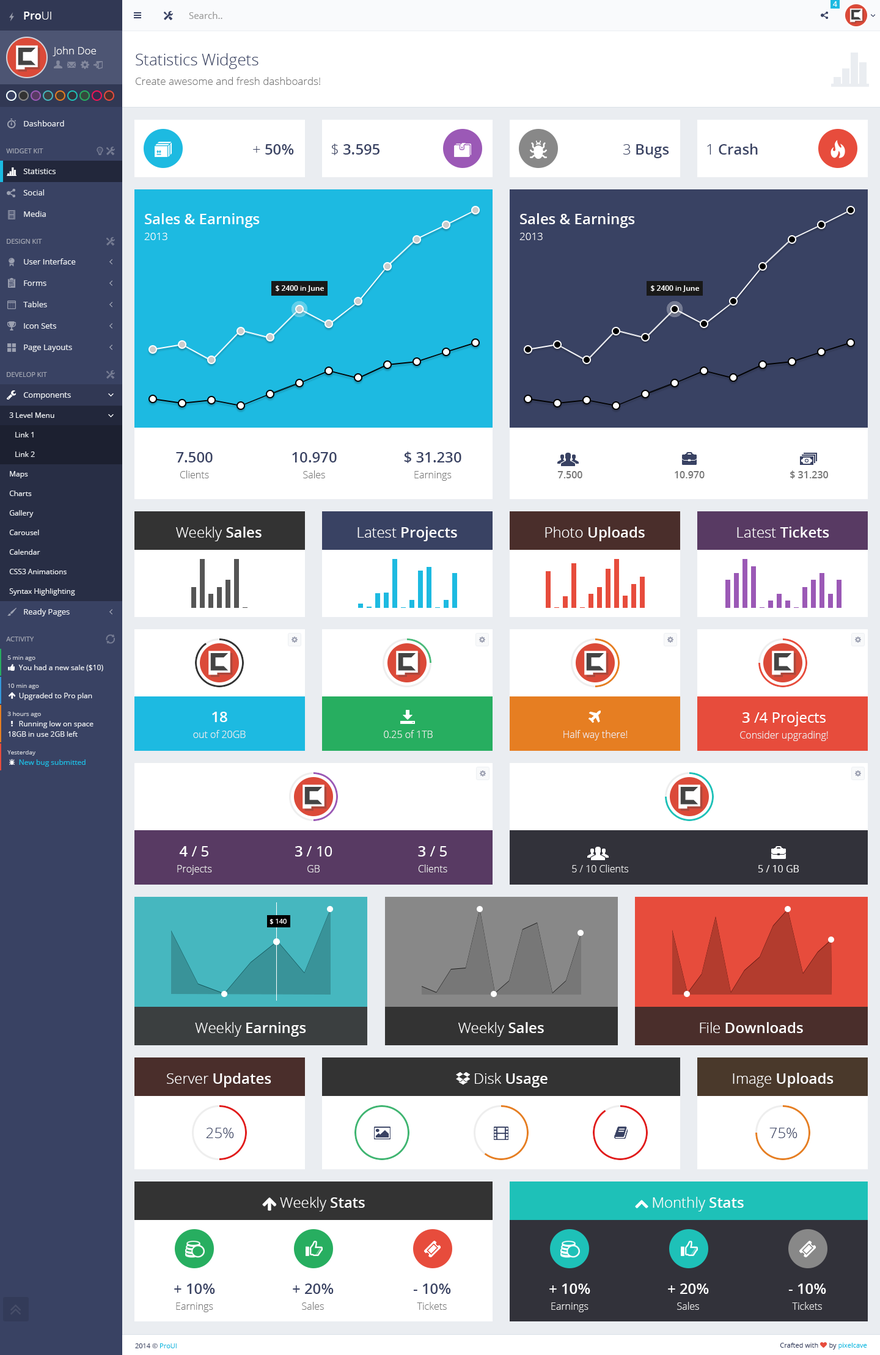
<style>
.page{position:relative;width:880px;height:1355px;background:#ffffff}
.page>*{position:absolute;margin:0}
.t1{font:7.3px "OpenSans";color:#ffffff}
.t2{font:11px "OpenSans-Semibold";color:#ffffff}
.t3{font:11px "OpenSans-Light";color:#ffffff}
.t4{font:9.2px "OpenSans";color:#999999}
.t5{font:10.4px "OpenSans-Light";color:#ffffff}
.t6{font:10.4px/19.6px "OpenSans-Light";color:#777777}
.t7{font:15.9px/19.6px "OpenSans-Light";color:#394263}
.t8{font:7.9px "OpenSans";color:#eaedf1}
.t9{font:6.7px "OpenSans";color:#a2a6b3}
.t10{font:14.7px "OpenSans-Semibold";color:#394263}
.t11{font:14.7px "OpenSans-Light";color:#394263}
.t12{font:14.7px/15.9px "OpenSans-Semibold";color:#ffffff}
.t13{font:10.4px/15.9px "OpenSans-Light";color:#ffffff}
.t14{font:7.3px "OpenSans-Semibold";color:#ffffff}
.t15{font:7.3px "OpenSans";color:#eaedf1}
.t16{font:9.8px/15.9px "OpenSans-Light";color:#777777}
.t17{font:14.7px/15.9px "OpenSans-Semibold";color:#394263}
.t18{font:9.8px "OpenSans-Semibold";color:#777777}
.t19{font:14.7px "OpenSans-Light";color:#ffffff}
.t20{font:14.7px "OpenSans-Semibold";color:#ffffff}
.t21{font:6.1px "OpenSans";color:#c8cbd3}
.t22{font:9.8px/15.9px "OpenSans-Light";color:#eeeeee}
.t23{font:14.7px/15.9px "OpenSans";color:#ffffff}
.t24{font:9.8px "OpenSans-Light";color:#eeeeee}
.t25{font:7.3px "OpenSans";color:#1bbae1}
.t26{font:9.8px "OpenSans";color:#eeeeee}
.t27{font:6.7px "OpenSans";color:#ffffff}
.t28{font:14.7px/15.9px "OpenSans";color:#394263}
.t29{font:6.7px "OpenSans";color:#394263}
.t30{font:6.7px "OpenSans";color:#0dbae1}
.t31{font:6.7px "OpenSans";color:#01bae1}
</style>
<div class="page">
<p class="t1" style="left:833px;top:1px;width:4px;height:6px">4</p>
<p class="t2" style="left:24px;top:12px;width:27px;height:8px">Pro<span class="t3">UI</span></p>
<p class="t4" style="left:189px;top:12px;width:33px;height:7px">Search..</p>
<p class="t5" style="left:53px;top:46px;width:43px;height:10px">John Doe</p>
<p class="t6" style="left:136px;top:53px;width:184px;height:32px"><span class="t7">Statistics Widgets<br></span>Create awesome and fresh dashboards!</p>
<p class="t8" style="left:24px;top:120px;width:40px;height:6px">Dashboard</p>
<p class="t9" style="left:6px;top:148px;width:37px;height:5px">WIDGET KIT</p>
<p class="t10" style="left:253px;top:144px;width:41px;height:11px"><span class="t11">+ </span>50%</p>
<p class="t10" style="left:331px;top:144px;width:48px;height:11px"><span class="t11">$ </span>3.595</p>
<p class="t10" style="left:623px;top:144px;width:46px;height:14px"><span class="t11">3 </span>Bugs</p>
<p class="t10" style="left:707px;top:144px;width:51px;height:11px"><span class="t11">1 </span>Crash</p>
<p class="t8" style="left:23px;top:169px;width:33px;height:5px">Statistics</p>
<p class="t8" style="left:23px;top:189px;width:21px;height:7px">Social</p>
<p class="t8" style="left:24px;top:211px;width:22px;height:6px">Media</p>
<p class="t12" style="left:144px;top:213px;width:116px;height:27px">Sales &amp; Earnings<br><span class="t13">2013</span></p>
<p class="t12" style="left:519px;top:213px;width:116px;height:27px">Sales &amp; Earnings<br><span class="t13">2013</span></p>
<p class="t9" style="left:7px;top:239px;width:35px;height:5px">DESIGN KIT</p>
<p class="t8" style="left:24px;top:258px;width:52px;height:7px">User Interface</p>
<p class="t8" style="left:24px;top:280px;width:22px;height:6px">Forms</p>
<p class="t14" style="left:276px;top:285px;width:48px;height:7px"><span class="t1">$ </span>2400<span class="t1"> in </span>June</p>
<p class="t14" style="left:651px;top:285px;width:48px;height:7px"><span class="t1">$ </span>2400<span class="t1"> in </span>June</p>
<p class="t8" style="left:23px;top:301px;width:24px;height:6px">Tables</p>
<p class="t8" style="left:24px;top:323px;width:32px;height:6px">Icon Sets</p>
<p class="t8" style="left:24px;top:345px;width:48px;height:7px">Page Layouts</p>
<p class="t9" style="left:7px;top:372px;width:40px;height:5px">DEVELOP KIT</p>
<p class="t8" style="left:23px;top:392px;width:48px;height:8px">Components</p>
<p class="t15" style="left:9px;top:412px;width:45px;height:6px">3 Level Menu</p>
<p class="t15" style="left:15px;top:432px;width:19px;height:5px">Link 1</p>
<p class="t15" style="left:15px;top:452px;width:20px;height:5px">Link 2</p>
<p class="t16" style="left:176px;top:452px;width:37px;height:26px;text-align:center"><span class="t17">7.500<br></span>Clients</p>
<p class="t17" style="left:292px;top:452px;width:45px;height:26px;text-align:center">10.970<br><span class="t16">Sales</span></p>
<p class="t17" style="left:404px;top:452px;width:57px;height:29px;text-align:center">$ 31.230<br><span class="t16">Earnings</span></p>
<p class="t15" style="left:10px;top:471px;width:18px;height:7px">Maps</p>
<p class="t18" style="left:557px;top:471px;width:25px;height:7px">7.500</p>
<p class="t18" style="left:675px;top:471px;width:30px;height:7px">10.970</p>
<p class="t18" style="left:790px;top:470px;width:39px;height:9px">$ 31.230</p>
<p class="t15" style="left:9px;top:491px;width:23px;height:5px">Charts</p>
<p class="t15" style="left:9px;top:510px;width:25px;height:8px">Gallery</p>
<p class="t15" style="left:9px;top:530px;width:30px;height:5px">Carousel</p>
<p class="t19" style="left:176px;top:527px;width:86px;height:14px">Weekly<span class="t20"> Sales</span></p>
<p class="t20" style="left:357px;top:527px;width:100px;height:14px"><span class="t19">Latest</span> Projects</p>
<p class="t20" style="left:545px;top:527px;width:100px;height:14px"><span class="t19">Photo </span>Uploads</p>
<p class="t20" style="left:737px;top:527px;width:92px;height:11px"><span class="t19">Latest </span>Tickets</p>
<p class="t15" style="left:9px;top:549px;width:31px;height:6px">Calendar</p>
<p class="t15" style="left:9px;top:569px;width:58px;height:5px">CSS3 Animations</p>
<p class="t15" style="left:9px;top:588px;width:66px;height:8px">Syntax Highlighting</p>
<p class="t8" style="left:24px;top:609px;width:46px;height:8px">Ready Pages</p>
<p class="t9" style="left:6px;top:637px;width:28px;height:5px">ACTIVITY</p>
<p class="t21" style="left:7px;top:656px;width:28px;height:5px">5 min ago</p>
<p class="t15" style="left:18px;top:665px;width:85px;height:7px">You had a new sale ($10)</p>
<p class="t21" style="left:8px;top:684px;width:31px;height:5px">10 min ago</p>
<p class="t15" style="left:19px;top:693px;width:73px;height:7px">Upgraded to Pro plan</p>
<p class="t21" style="left:7px;top:712px;width:34px;height:5px">3 hours ago</p>
<p class="t22" style="left:193px;top:712px;width:53px;height:26px;text-align:center"><span class="t12">18<br></span>out of 20GB</p>
<p class="t22" style="left:740px;top:712px;width:88px;height:29px;text-align:center"><span class="t12">3 </span><span class="t23">/4 Projects<br></span>Consider upgrading!</p>
<p class="t15" style="left:19px;top:721px;width:74px;height:7px">Running low on space</p>
<p class="t15" style="left:8px;top:731px;width:70px;height:6px">18GB in use 2GB left</p>
<p class="t24" style="left:384px;top:730px;width:49px;height:8px">0.25 of 1TB</p>
<p class="t24" style="left:563px;top:730px;width:65px;height:11px">Half way there!</p>
<p class="t21" style="left:7px;top:750px;width:28px;height:6px">Yesterday</p>
<p class="t25" style="left:19px;top:759px;width:67px;height:8px">New bug submitted</p>
<p class="t22" style="left:177px;top:846px;width:35px;height:29px;text-align:center"><span class="t12">4 </span><span class="t23">/ 5<br></span>Projects</p>
<p class="t23" style="left:295px;top:846px;width:37px;height:27px;text-align:center"><span class="t12">3 </span>/ 10<br><span class="t22">GB</span></p>
<p class="t22" style="left:418px;top:846px;width:29px;height:27px;text-align:center"><span class="t12">3 </span><span class="t23">/ 5<br></span>Clients</p>
<p class="t24" style="left:572px;top:865px;width:56px;height:8px">5 / 10 Clients</p>
<p class="t26" style="left:758px;top:865px;width:41px;height:8px">5 / 10 GB</p>
<p class="t27" style="left:269px;top:919px;width:18px;height:5px">$ 140</p>
<p class="t20" style="left:195px;top:1022px;width:111px;height:15px"><span class="t19">Weekly</span> Earnings</p>
<p class="t19" style="left:458px;top:1022px;width:86px;height:15px">Weekly <span class="t20">Sales</span></p>
<p class="t20" style="left:700px;top:1022px;width:103px;height:11px"><span class="t19">File </span>Downloads</p>
<p class="t20" style="left:167px;top:1073px;width:104px;height:15px"><span class="t19">Server </span>Updates</p>
<p class="t20" style="left:475px;top:1073px;width:72px;height:15px"><span class="t19">Disk </span>Usage</p>
<p class="t20" style="left:733px;top:1073px;width:100px;height:15px"><span class="t19">Image </span>Uploads</p>
<p class="t11" style="left:206px;top:1128px;width:28px;height:10px">25%</p>
<p class="t11" style="left:769px;top:1128px;width:28px;height:10px">75%</p>
<p class="t19" style="left:280px;top:1197px;width:85px;height:15px">Weekly <span class="t20">Stats</span></p>
<p class="t19" style="left:653px;top:1197px;width:91px;height:15px">Monthly <span class="t20">Stats</span></p>
<p class="t16" style="left:174px;top:1284px;width:41px;height:28px;text-align:center"><span class="t28">+</span><span class="t17"> 10%<br></span>Earnings</p>
<p class="t16" style="left:293px;top:1284px;width:41px;height:26px;text-align:center"><span class="t28">+</span><span class="t17"> 20%<br></span>Sales</p>
<p class="t16" style="left:413px;top:1284px;width:38px;height:26px;text-align:center"><span class="t28">-</span><span class="t17"> 10%<br></span>Tickets</p>
<p class="t22" style="left:549px;top:1284px;width:41px;height:28px;text-align:center"><span class="t23">+</span><span class="t12"> 10%<br></span>Earnings</p>
<p class="t22" style="left:668px;top:1284px;width:41px;height:26px;text-align:center"><span class="t23">+</span><span class="t12"> 20%<br></span>Sales</p>
<p class="t22" style="left:788px;top:1284px;width:38px;height:26px;text-align:center"><span class="t23">-</span><span class="t12"> 10%<br></span>Tickets</p>
<p class="t29" style="left:135px;top:1344px;width:42px;height:5px">2014 © <span class="t30">ProUI</span></p>
<p class="t29" style="left:780px;top:1343px;width:87px;height:7px">Crafted with      by <span class="t31">pixelcave</span></p>
</div>
